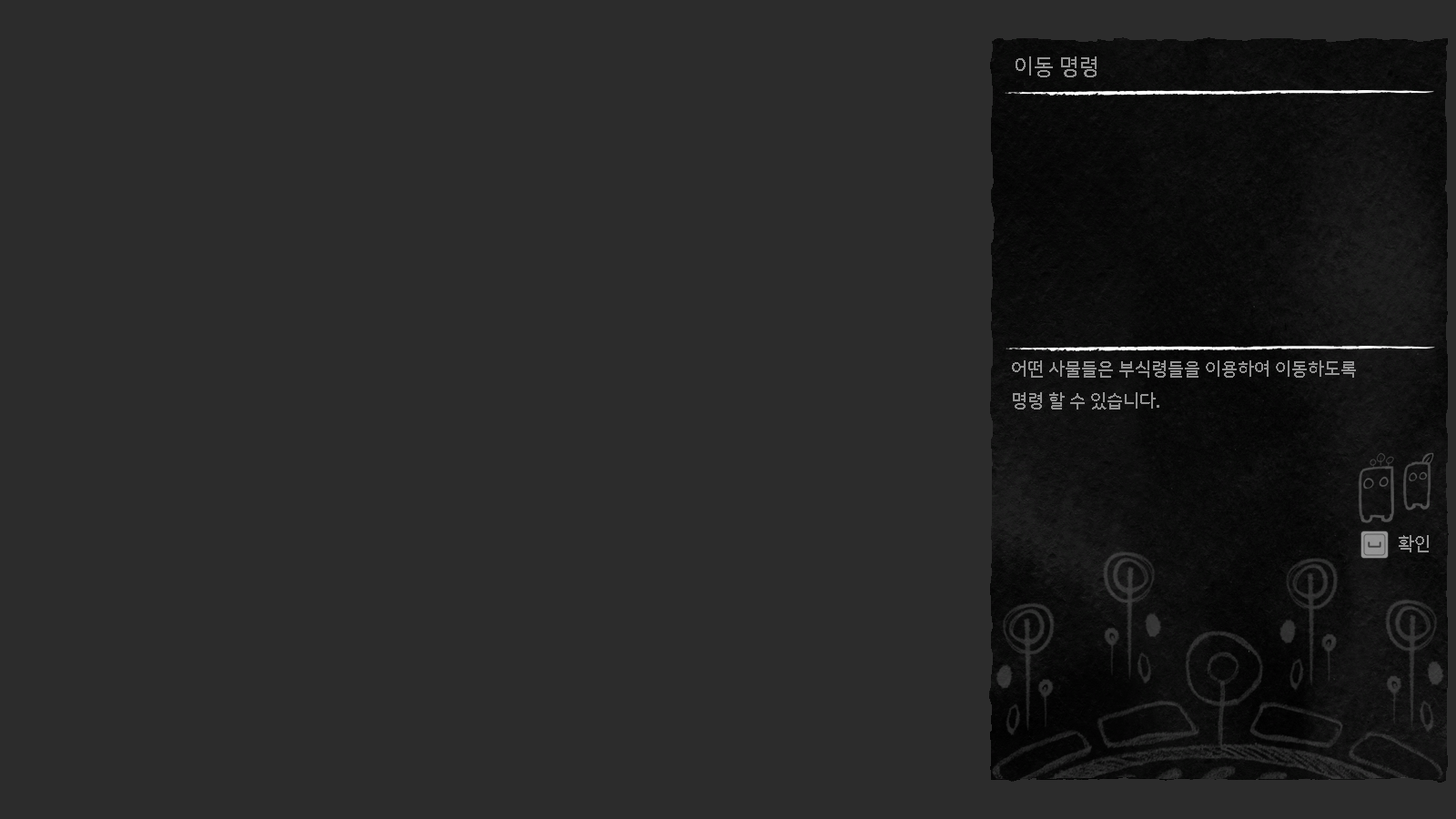
<style>
.page{position:relative;width:1456px;height:819px;background:#2c2c2c}
.page>*{position:absolute;margin:0}
.t1{font:21.8px "NanumSquareRoundB";color:#939393}
.t2{font:18.2px "NanumSquareRoundB";color:#939393}
</style>
<div class="page">
<p class="t1" style="left:1016px;top:56px;width:81px;height:21px">이동 명령</p>
<p class="t2" style="left:1012px;top:360px;width:344px;height:49px">어떤 사물들은 부식령들을 이용하여 이동하도록<br>명령 할 수 있습니다.</p>
<p class="t2" style="left:1399px;top:535px;width:30px;height:17px">확인</p>
</div>
